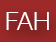
<style>
.page{position:relative;width:56px;height:42px}
.page>*{position:absolute;margin:0}
.t1{font:25.4px "HelveticaNeue-Light";color:#ffffff}
</style>
<div class="page">
<p class="t1" style="left:6px;top:12px;width:43px;height:18px">FAH</p>
</div>
